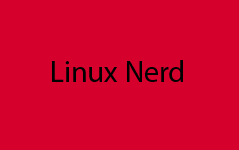
<style>
.page{position:relative;width:239px;height:150px;background:#d6002d}
.page>*{position:absolute;margin:0}
.t1{font:30.2px "MyriadPro-Regular";color:#000000}
</style>
<div class="page">
<p class="t1" style="left:52px;top:60px;width:131px;height:22px">Linux Nerd</p>
</div>
